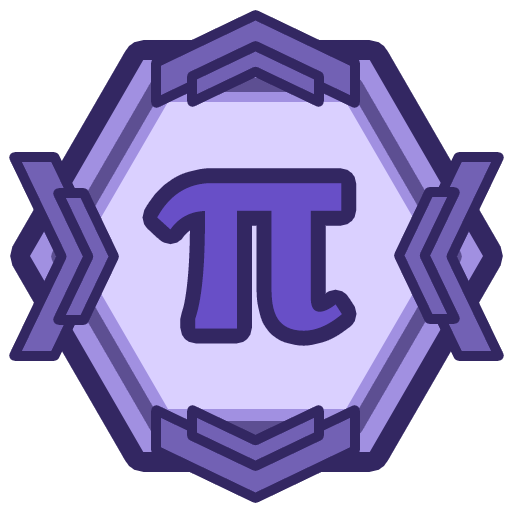
<style>
.page{position:relative;width:512px;height:512px;background:#ffffff}
.page>*{position:absolute;margin:0}
.t1{font:300px "Cambria-Bold";color:#684fc7}
</style>
<div class="page">
<p class="t1" style="left:157px;top:183px;width:185px;height:148px">π</p>
</div>
